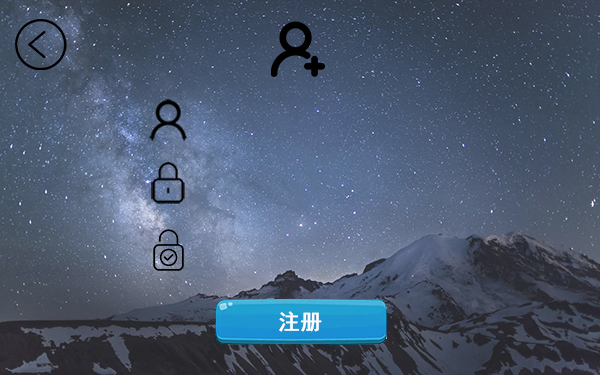
<style>
.page{position:relative;width:600px;height:375px}
.page>*{position:absolute;margin:0}
.t1{font:21.3px "SimHei";color:#ffffff;font-weight:bold}
</style>
<div class="page">
<p class="t1" style="left:279px;top:311px;width:43px;height:21px">注册</p>
</div>
